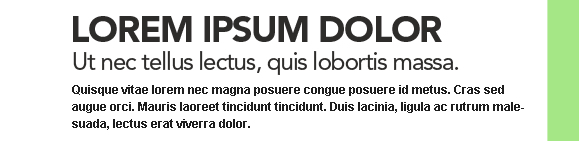
<style>
.page{position:relative;width:579px;height:141px;background:#ffffff}
.page>*{position:absolute;margin:0}
.t1{font:36px "Avenir-Black";letter-spacing:-0.04em;color:#2e2b2b;text-transform:uppercase}
.t2{font:24px "Avenir-Roman";letter-spacing:-0.04em;color:#2e2b2b}
.t3{font:12px/17px "Arial-BoldMT";color:#1e1e1e}
</style>
<div class="page">
<p class="t1" style="left:73px;top:16px;width:369px;height:26px">Lorem ipsum dolor</p>
<p class="t2" style="left:73px;top:51px;width:386px;height:24px">Ut nec tellus lectus, quis lobortis massa.</p>
<p class="t3" style="left:72px;top:85px;width:452px;height:45px">Quisque vitae lorem nec magna posuere congue posuere id metus. Cras sed augue orci. Mauris laoreet tincidunt tincidunt. Duis lacinia, ligula ac rutrum malesuada, lectus erat viverra dolor.<br><br>» read more</p>
</div>
